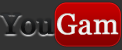
<style>
.page{position:relative;width:122px;height:50px;background:#333333}
.page>*{position:absolute;margin:0}
.t1{font:28.9px "Georgia";color:#1b1b1d;font-weight:bold}
.t2{font:28.9px "Georgia";color:#eeeeec;font-weight:bold}
</style>
<div class="page">
<p class="t1" style="left:0px;top:13px;width:54px;height:22px">You</p>
<p class="t2" style="left:57px;top:13px;width:62px;height:22px">Gam</p>
</div>
